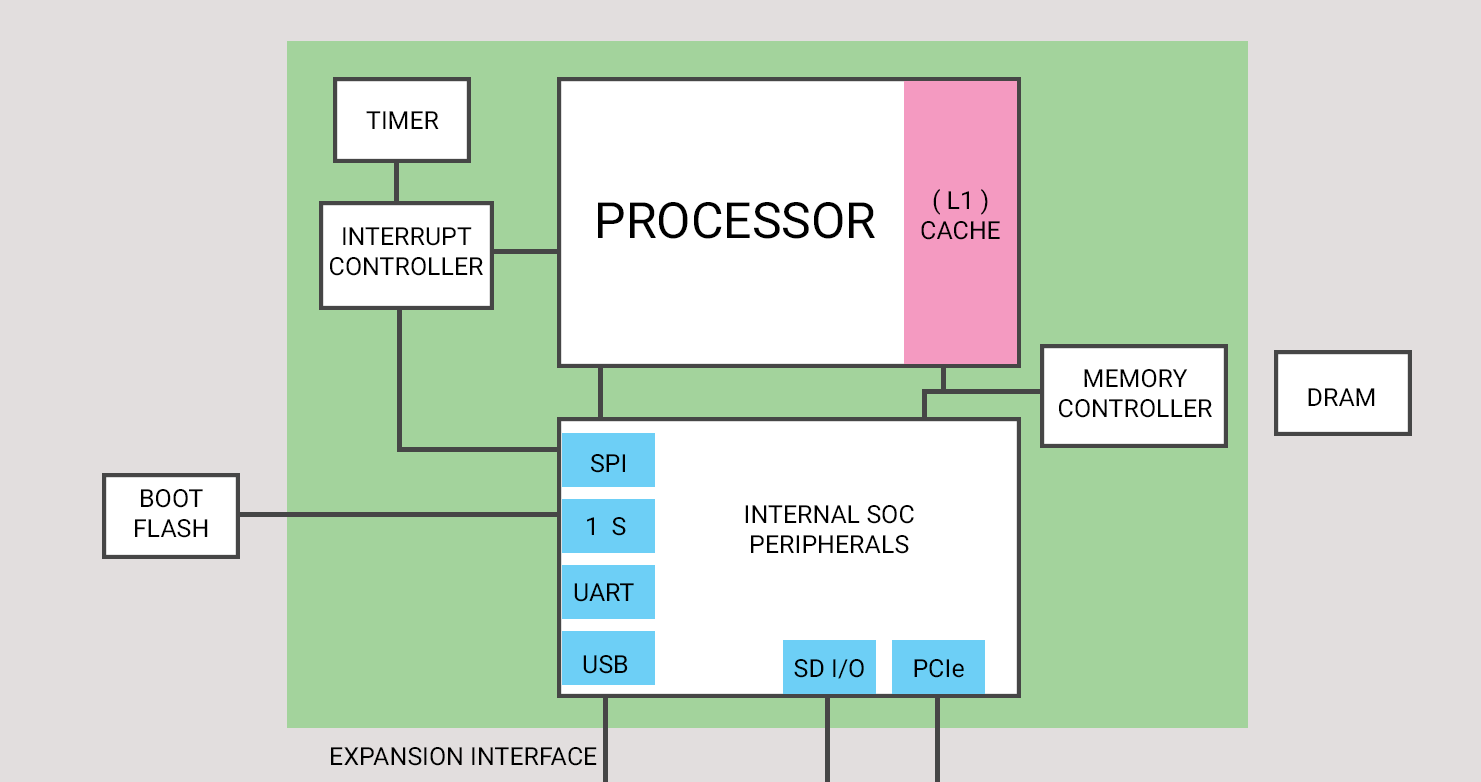
<style>
.page{position:relative;width:1481px;height:782px;background:#e2dede}
.page>*{position:absolute;margin:0}
.t1{font:25px "Roboto-Regular";color:#000000}
.t2{font:50px "Roboto-Regular";color:#000000}
</style>
<div class="page">
<p class="t1" style="left:366px;top:111px;width:73px;height:18px">TIMER</p>
<p class="t1" style="left:921px;top:189px;width:79px;height:51px;text-align:center">( L1 ) <br>CACHE</p>
<p class="t2" style="left:598px;top:202px;width:277px;height:37px">PROCESSOR</p>
<p class="t1" style="left:330px;top:227px;width:153px;height:49px;text-align:center">INTERRUPT<br>CONTROLLER</p>
<p class="t1" style="left:1059px;top:369px;width:153px;height:49px;text-align:center">MEMORY<br>CONTROLLER</p>
<p class="t1" style="left:1308px;top:388px;width:67px;height:18px">DRAM</p>
<p class="t1" style="left:591px;top:454px;width:34px;height:19px">SPI</p>
<p class="t1" style="left:135px;top:489px;width:73px;height:49px;text-align:center">BOOT<br>FLASH</p>
<p class="t1" style="left:745px;top:505px;width:169px;height:49px;text-align:center">INTERNAL SOC<br>PERIPHERALS</p>
<p class="t1" style="left:587px;top:517px;width:39px;height:19px">1  S</p>
<p class="t1" style="left:574px;top:583px;width:60px;height:19px">UART</p>
<p class="t1" style="left:583px;top:655px;width:45px;height:19px">USB</p>
<p class="t1" style="left:794px;top:659px;width:70px;height:20px">SD I/O</p>
<p class="t1" style="left:914px;top:659px;width:50px;height:19px">PCIe</p>
<p class="t1" style="left:331px;top:747px;width:266px;height:19px">EXPANSION INTERFACE</p>
</div>
